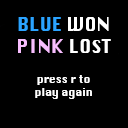
<style>
.page{position:relative;width:128px;height:128px;background:#000000}
.page>*{position:absolute;margin:0}
.t1{font:18px "Krungthep";color:#2ba3ff}
.t2{font:18px "Krungthep";color:#ffffff}
.t3{font:18px "Krungthep";color:#f8beff}
.t4{font:10.4px "Krungthep";color:#ffffff}
</style>
<div class="page">
<p class="t1" style="left:18px;top:17px;width:93px;height:36px;text-align:center">BLUE<span class="t2"> WON<br></span><span class="t3">PINK</span><span class="t2"> LOST</span></p>
<p class="t4" style="left:35px;top:75px;width:57px;height:24px;text-align:center">press r to <br>play again</p>
</div>
